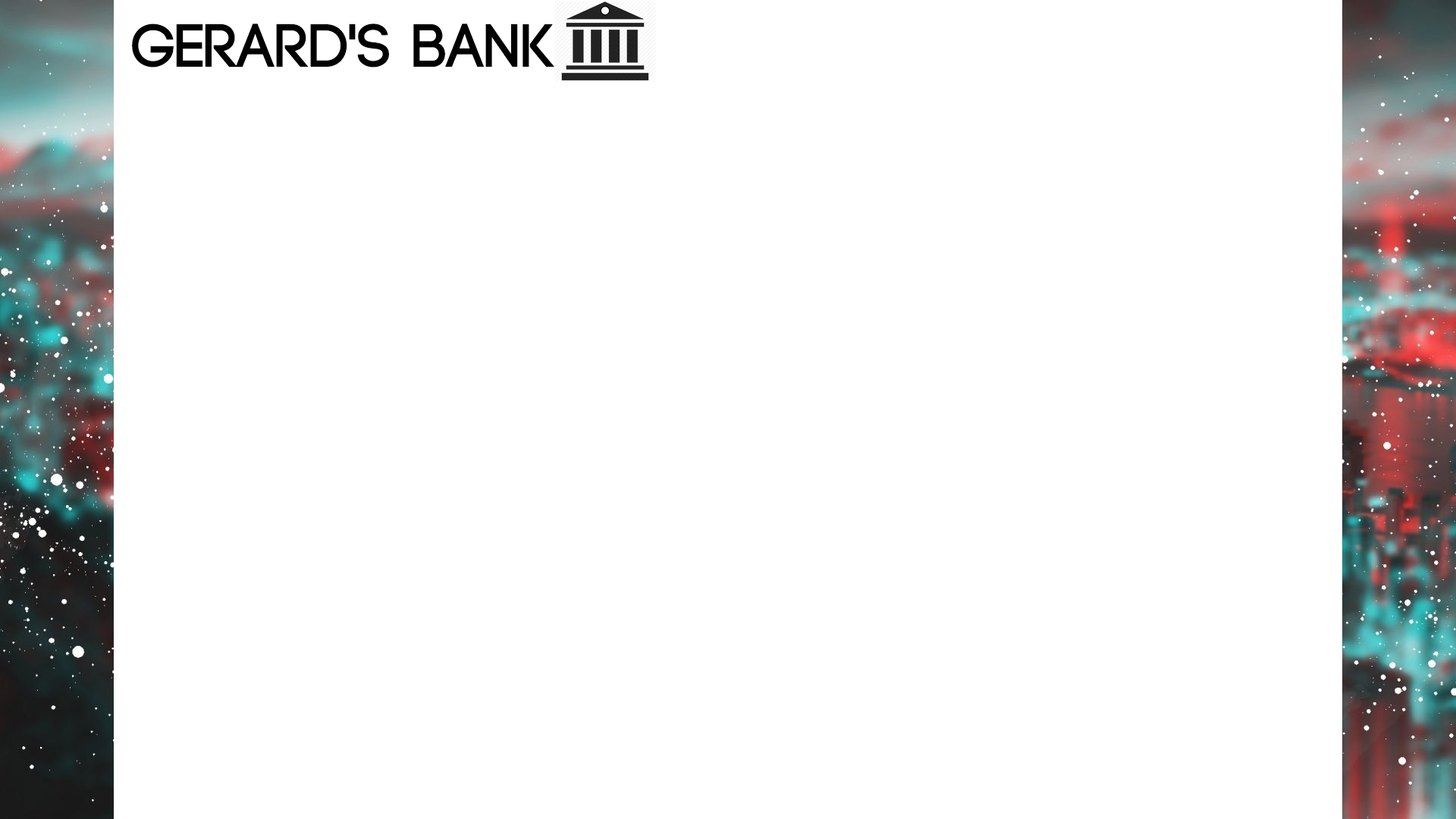
<style>
.page{position:relative;width:1456px;height:819px;background:#ffffff}
.page>*{position:absolute;margin:0}
.t1{font:60.7px "Code-Bold";color:#010101}
</style>
<div class="page">
<p class="t1" style="left:132px;top:24px;width:422px;height:43px">Gerard's bank</p>
</div>
